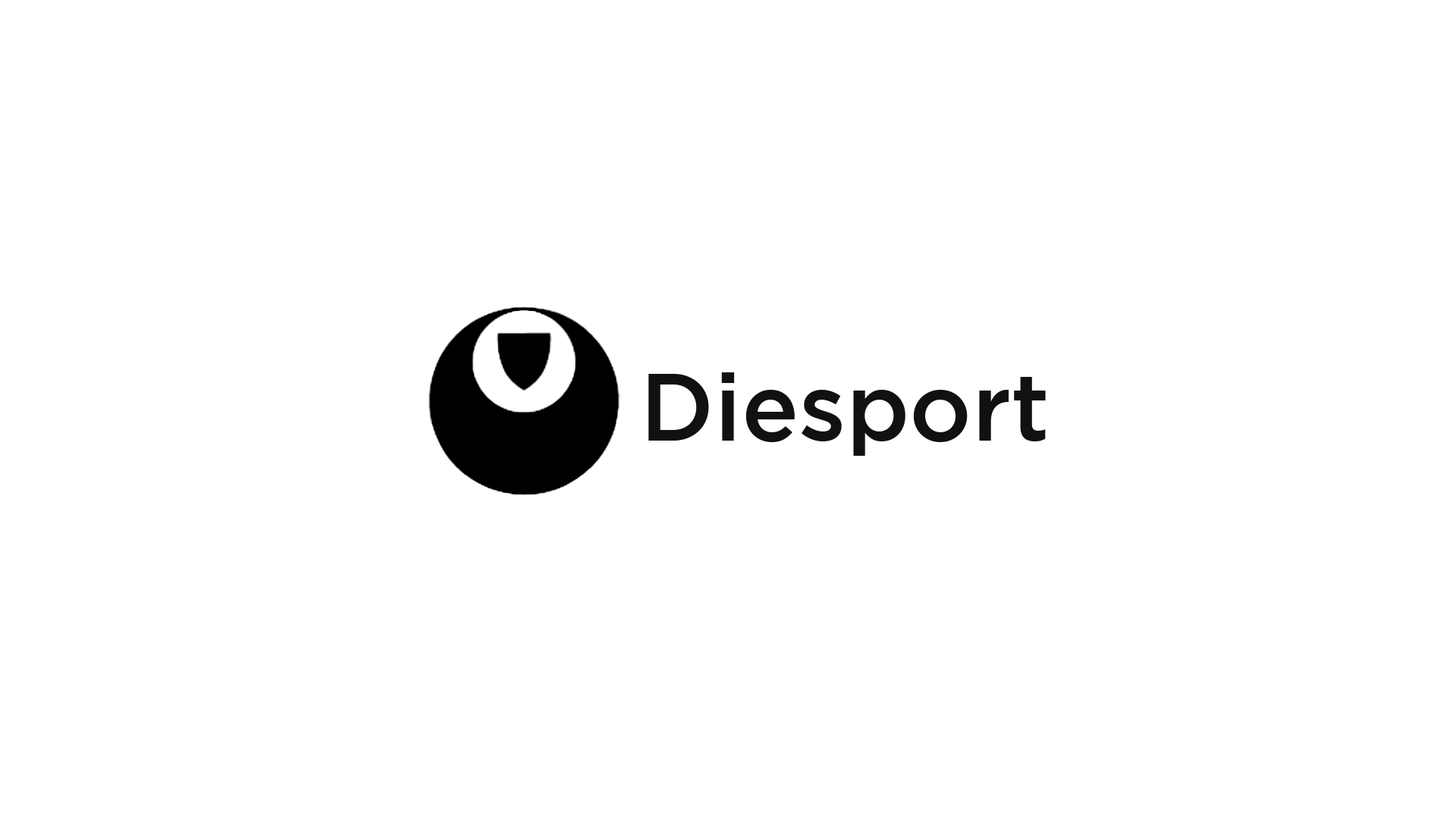
<style>
.page{position:relative;width:1456px;height:819px;background:#ffffff}
.page>*{position:absolute;margin:0}
.t1{font:94.8px "Gotham-Medium";color:#111111}
</style>
<div class="page">
<p class="t1" style="left:648px;top:372px;width:398px;height:84px">Diesport</p>
</div>
